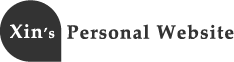
<style>
.page{position:relative;width:234px;height:62px;background:#ffffff}
.page>*{position:absolute;margin:0}
.t1{font:19.3px "Palatino-Bold";letter-spacing:0.05em;color:#ffffff}
.t2{font:14.5px "Palatino-Bold";letter-spacing:0.05em;color:#ffffff}
.t3{font:19.3px "Palatino-Bold";letter-spacing:0.05em;color:#333333}
</style>
<div class="page">
<p class="t1" style="left:10px;top:24px;width:45px;height:15px">Xin<span class="t2">’s</span></p>
<p class="t3" style="left:67px;top:24px;width:167px;height:15px">Personal Website</p>
</div>
